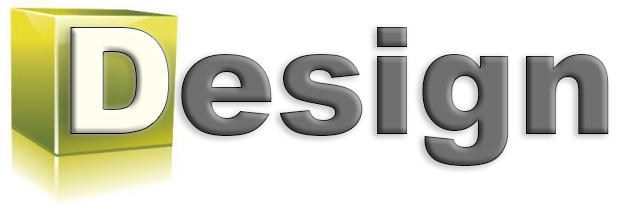
<style>
.page{position:relative;width:617px;height:204px;background:#ffffff}
.page>*{position:absolute;margin:0}
.t1{font:150px "Arial-Black";color:#6f6f6f}
.t2{font:150px "Arial-Black";color:#fffeee}
</style>
<div class="page">
<p class="t1" style="left:70px;top:27px;width:539px;height:139px"><span class="t2">D</span>esign</p>
</div>
